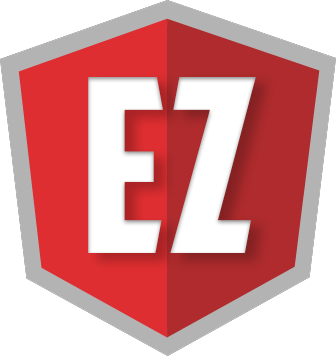
<style>
.page{position:relative;width:336px;height:356px;background:#ffffff}
.page>*{position:absolute;margin:0}
.t1{font:243px "AmericanCaptain";color:#ffffff}
</style>
<div class="page">
<p class="t1" style="left:88px;top:77px;width:168px;height:176px">ez</p>
</div>
